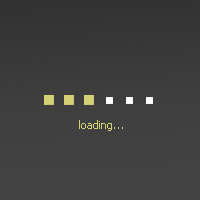
<style>
.page{position:relative;width:200px;height:200px}
.page>*{position:absolute;margin:0}
.t1{font:11px "Tahoma";color:#d4d174}
</style>
<div class="page">
<p class="t1" style="left:79px;top:120px;width:44px;height:11px">loading...</p>
</div>
